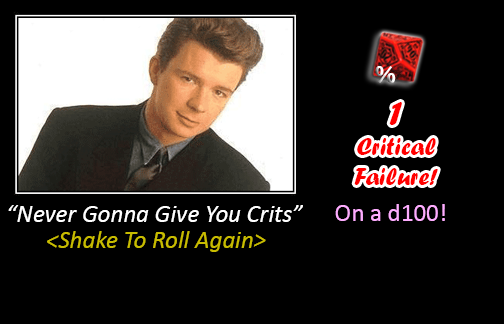
<style>
.page{position:relative;width:504px;height:324px;background:#000000}
.page>*{position:absolute;margin:0}
.t1{font:25px "ForteMT";color:#ff0000}
.t2{font:35px "ForteMT";color:#ff0000}
.t3{font:25px "Calibri-Italic";color:#ffffff}
.t4{font:25px "Calibri";color:#feadff}
.t5{font:25px "Calibri-Italic";color:#c8bc00}
</style>
<div class="page">
<p class="t1" style="left:354px;top:102px;width:84px;height:83px;text-align:center"><span class="t2">1<br></span>Critical Failure!</p>
<p class="t3" style="left:8px;top:205px;width:295px;height:17px">“Never Gonna Give You Crits”</p>
<p class="t4" style="left:335px;top:204px;width:110px;height:17px">On a d100!</p>
<p class="t5" style="left:47px;top:231px;width:219px;height:21px">&lt;Shake To Roll Again&gt;</p>
</div>
